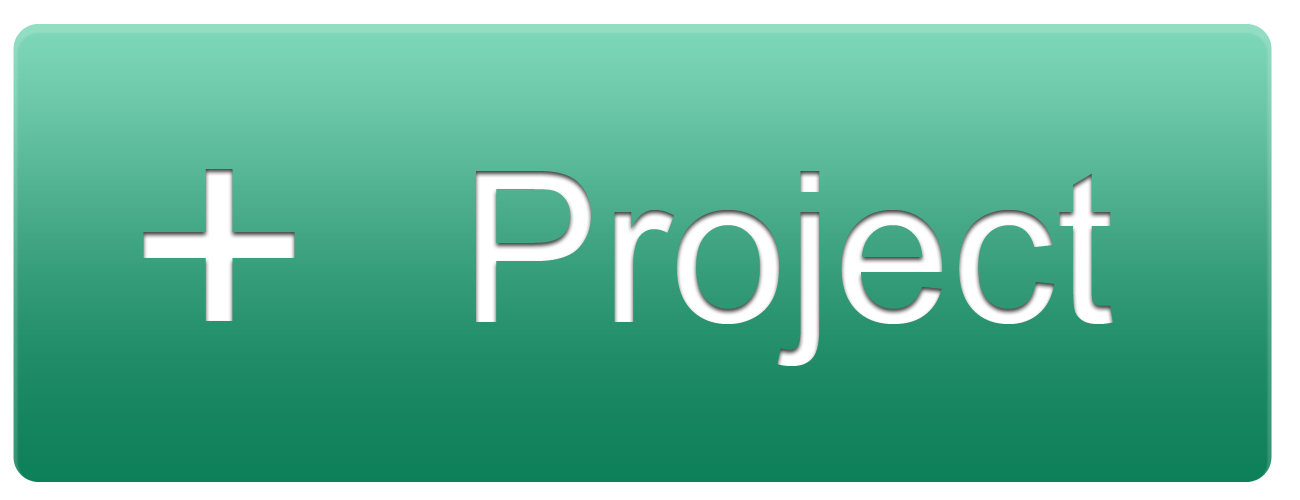
<style>
.page{position:relative;width:1300px;height:500px}
.page>*{position:absolute;margin:0}
.t1{font:319px "ArialMT";color:#ffffff}
.t2{font:210px "ArialMT";color:#ffffff}
</style>
<div class="page">
<p class="t1" style="left:143px;top:169px;width:152px;height:152px">+</p>
<p class="t2" style="left:476px;top:171px;width:637px;height:195px">Project</p>
</div>
